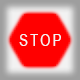
<style>
.page{position:relative;width:80px;height:80px;background:#ff0000}
.page>*{position:absolute;margin:0}
.t1{font:16.7px "ArialMT";letter-spacing:0.16em;color:#f2f2f2;scale:0.8 1}
</style>
<div class="page">
<p class="t1" style="left:19px;top:34px;width:42px;height:12px">STOP</p>
</div>
